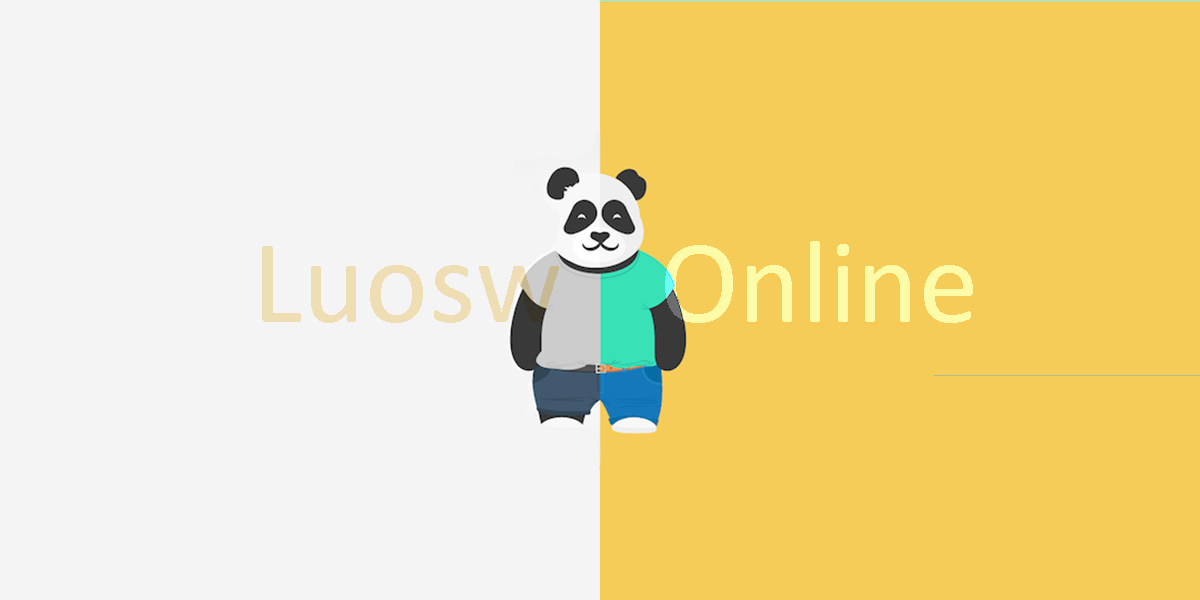
<style>
.page{position:relative;width:1200px;height:600px;background:#f5cc58}
.page>*{position:absolute;margin:0}
.t1{font:120px "Calibri";color:#efddb3}
.t2{font:120px "Calibri";color:#fefba8}
</style>
<div class="page">
<p class="t1" style="left:262px;top:246px;width:297px;height:77px">Luosw</p>
<p class="t2" style="left:665px;top:241px;width:308px;height:82px">Online</p>
</div>
